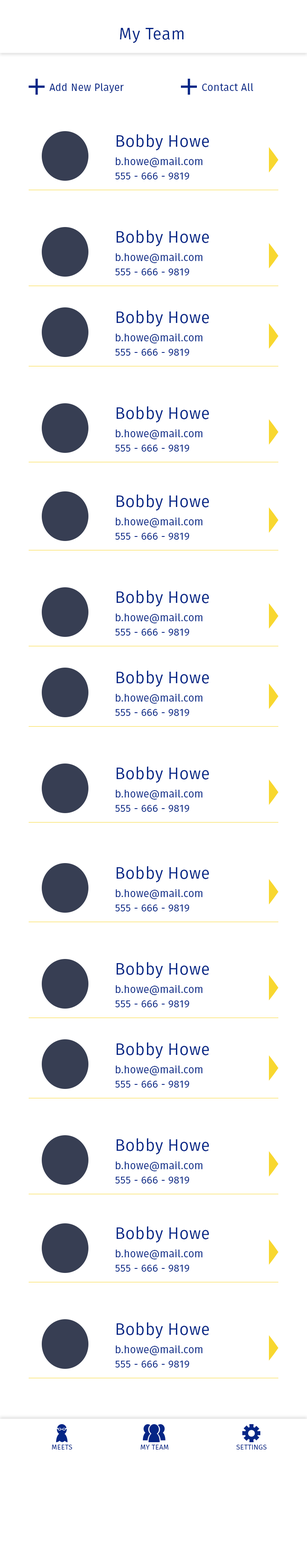
<style>
.page{position:relative;width:307px;height:1568px;background:#ffffff}
.page>*{position:absolute;margin:0}
.t1{font:16.4px "FiraSans-Book";letter-spacing:0.02em;color:#052686}
.t2{font:10.2px "FiraSans-Book";letter-spacing:0.02em;color:#052686}
.t3{font:10.2px/14.3px "FiraSans-Book";letter-spacing:0.02em;color:#052686}
.t4{font:16.4px/23.8px "FiraSans-Book";letter-spacing:0.02em;color:#052686}
.t5{font:7px "FiraSans-Book";letter-spacing:0.02em;color:#052686;text-transform:uppercase}
</style>
<div class="page">
<p class="t1" style="left:120px;top:28px;width:64px;height:15px">My Team</p>
<p class="t2" style="left:50px;top:83px;width:74px;height:10px">Add New Player</p>
<p class="t2" style="left:202px;top:83px;width:52px;height:8px">Contact All</p>
<p class="t3" style="left:115px;top:134px;width:94px;height:46px"><span class="t4">Bobby Howe<br></span>b.howe@mail.com<br>555 - 666 - 9819</p>
<p class="t3" style="left:115px;top:230px;width:94px;height:46px"><span class="t4">Bobby Howe<br></span>b.howe@mail.com<br>555 - 666 - 9819</p>
<p class="t3" style="left:115px;top:310px;width:94px;height:46px"><span class="t4">Bobby Howe<br></span>b.howe@mail.com<br>555 - 666 - 9819</p>
<p class="t3" style="left:115px;top:406px;width:94px;height:46px"><span class="t4">Bobby Howe<br></span>b.howe@mail.com<br>555 - 666 - 9819</p>
<p class="t3" style="left:115px;top:494px;width:94px;height:46px"><span class="t4">Bobby Howe<br></span>b.howe@mail.com<br>555 - 666 - 9819</p>
<p class="t3" style="left:115px;top:590px;width:94px;height:46px"><span class="t4">Bobby Howe<br></span>b.howe@mail.com<br>555 - 666 - 9819</p>
<p class="t3" style="left:115px;top:670px;width:94px;height:46px"><span class="t4">Bobby Howe<br></span>b.howe@mail.com<br>555 - 666 - 9819</p>
<p class="t3" style="left:115px;top:766px;width:94px;height:46px"><span class="t4">Bobby Howe<br></span>b.howe@mail.com<br>555 - 666 - 9819</p>
<p class="t3" style="left:115px;top:866px;width:94px;height:46px"><span class="t4">Bobby Howe<br></span>b.howe@mail.com<br>555 - 666 - 9819</p>
<p class="t3" style="left:115px;top:962px;width:94px;height:46px"><span class="t4">Bobby Howe<br></span>b.howe@mail.com<br>555 - 666 - 9819</p>
<p class="t3" style="left:115px;top:1042px;width:94px;height:46px"><span class="t4">Bobby Howe<br></span>b.howe@mail.com<br>555 - 666 - 9819</p>
<p class="t3" style="left:115px;top:1138px;width:94px;height:46px"><span class="t4">Bobby Howe<br></span>b.howe@mail.com<br>555 - 666 - 9819</p>
<p class="t3" style="left:115px;top:1226px;width:94px;height:46px"><span class="t4">Bobby Howe<br></span>b.howe@mail.com<br>555 - 666 - 9819</p>
<p class="t3" style="left:115px;top:1322px;width:94px;height:46px"><span class="t4">Bobby Howe<br></span>b.howe@mail.com<br>555 - 666 - 9819</p>
<p class="t5" style="left:52px;top:1445px;width:20px;height:5px">Meets</p>
<p class="t5" style="left:141px;top:1445px;width:28px;height:5px">My Team</p>
<p class="t5" style="left:236px;top:1445px;width:31px;height:5px">Settings</p>
</div>
